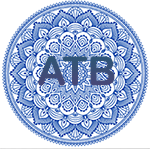
<style>
.page{position:relative;width:150px;height:149px;background:#ffffff}
.page>*{position:absolute;margin:0}
.t1{font:39.9px "ArialRoundedMTBold";color:#3a4f76}
</style>
<div class="page">
<p class="t1" style="left:38px;top:56px;width:77px;height:30px">ATB</p>
</div>
